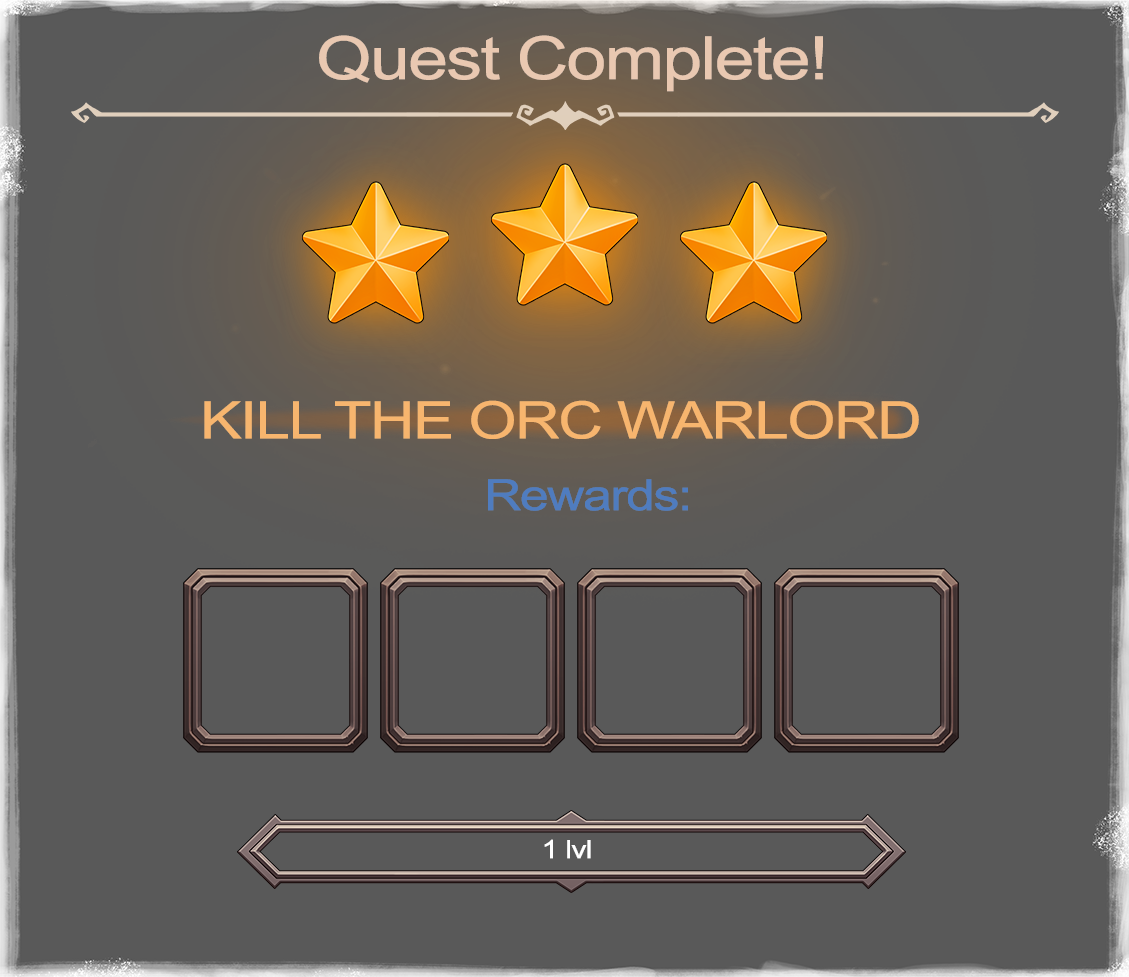
<style>
.page{position:relative;width:1129px;height:977px;background:#595959}
.page>*{position:absolute;margin:0}
.t1{font:59.7px "ArialMT";letter-spacing:-0.025em;color:#e9c8b1;scale:1.2 1}
.t2{font:51.6px "ArialMT";letter-spacing:-0.025em;color:#f7b56e;scale:1.2 1}
.t3{font:42.8px "ArialMT";letter-spacing:-0.025em;color:#4f7cbf;scale:1.2 1}
.t4{font:25.3px "ArialMT";letter-spacing:-0.025em;color:#ffffff;scale:1.2 1}
</style>
<div class="page">
<p class="t1" style="left:319px;top:35px;width:504px;height:57px">Quest Complete!</p>
<p class="t2" style="left:204px;top:400px;width:715px;height:39px">KILL THE ORC WARLORD</p>
<p class="t3" style="left:488px;top:479px;width:200px;height:32px">Rewards:</p>
<p class="t4" style="left:544px;top:839px;width:47px;height:20px">1 lvl</p>
</div>
